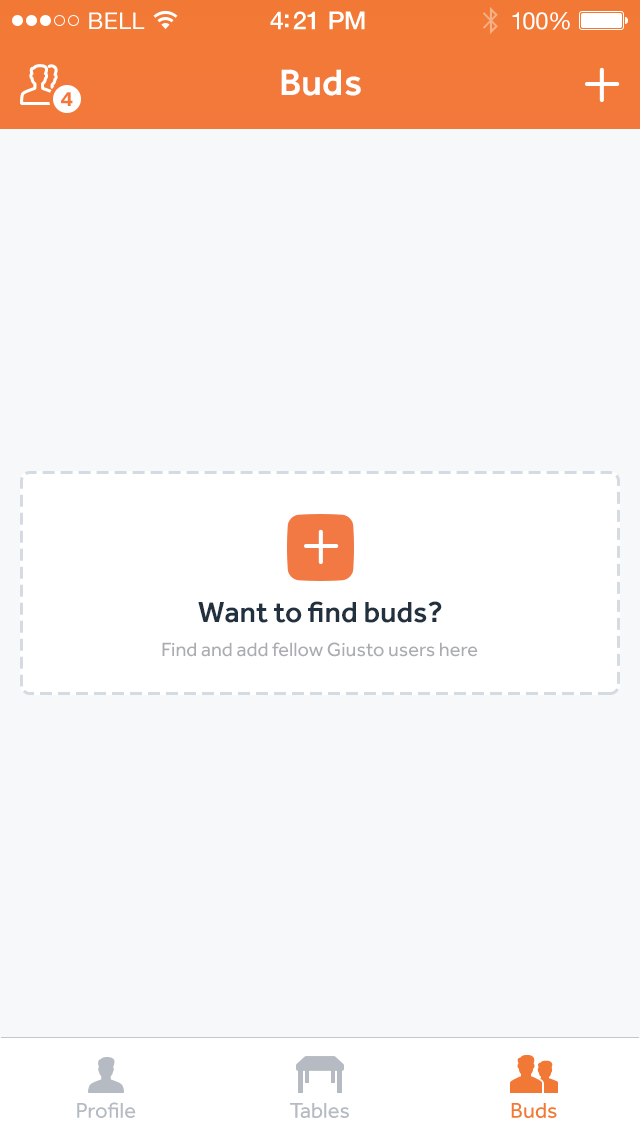
<style>
.page{position:relative;width:640px;height:1136px;background:#f6f8fa}
.page>*{position:absolute;margin:0}
.t1{font:23px "HelveticaNeue";letter-spacing:0.02em;color:#ffffff}
.t2{font:25px "HelveticaNeue-Medium";letter-spacing:-0.02em;color:#ffffff}
.t3{font:24px "HelveticaNeue";letter-spacing:-0.02em;color:#ffffff}
.t4{font:38px "Effra-Medium";color:#ffffff}
.t5{font:20px "Gibson-SemiBold";color:#f27939}
.t6{font:30px "Effra-Medium";color:#22313f}
.t7{font:20px "Effra-Regular";color:#a9acb0}
.t8{font:22px "Effra-Regular";color:#b5bac3}
.t9{font:22px "Effra-Regular";color:#f27935}
</style>
<div class="page">
<p class="t1" style="left:89px;top:12px;width:56px;height:17px">BELL</p>
<p class="t2" style="left:270px;top:11px;width:95px;height:19px">4:21 PM</p>
<p class="t3" style="left:512px;top:12px;width:58px;height:18px">100%</p>
<p class="t4" style="left:281px;top:69px;width:80px;height:27px">Buds</p>
<p class="t5" style="left:61px;top:92px;width:12px;height:14px">4</p>
<p class="t6" style="left:198px;top:601px;width:244px;height:22px">Want to find buds?</p>
<p class="t7" style="left:162px;top:642px;width:316px;height:15px">Find and add fellow Giusto users here</p>
<p class="t8" style="left:77px;top:1102px;width:59px;height:16px">Profile</p>
<p class="t8" style="left:290px;top:1103px;width:59px;height:15px">Tables</p>
<p class="t9" style="left:511px;top:1103px;width:46px;height:15px">Buds</p>
</div>
